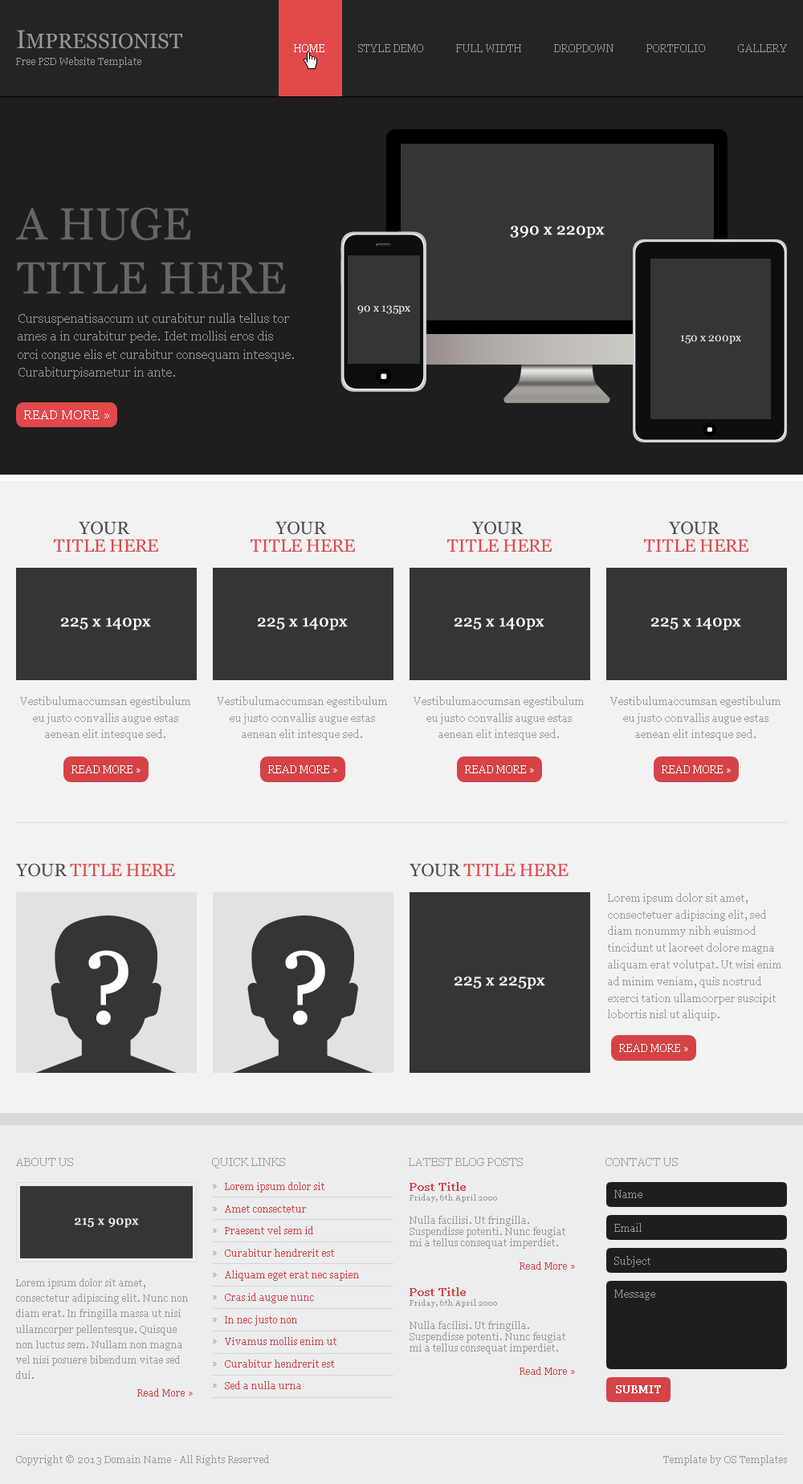
<style>
.page{position:relative;width:803px;height:1484px;background:#f2f2f2}
.page>*{position:absolute;margin:0}
.t1{font:20.9px "Georgia";color:#999999}
.t2{font:25.7px "Georgia";color:#999999}
.t3{font:10.4px "Georgia";color:#ffffff}
.t4{font:10.4px "Georgia";color:#979797}
.t5{font:9.6px "Georgia";color:#999999}
.t6{font:45px/54px "Georgia";color:#666666}
.t7{font:16.1px "Georgia";color:#ffffff;font-weight:bold}
.t8{font:11.2px "Georgia";color:#ffffff}
.t9{font:12.9px/18px "Georgia";color:#999999}
.t10{font:12.9px "Georgia";color:#ffffff}
.t11{font:17.7px/17.7px "Georgia";color:#e1484b}
.t12{font:17.7px/17.7px "Georgia";color:#4a4a4a}
.t13{font:10.4px/16.7px "Georgia";color:#999999}
.t14{font:17.7px "Georgia";color:#e1484b}
.t15{font:17.7px "Georgia";color:#4a4a4a}
.t16{font:102.7px "Georgia";color:#ffffff;font-weight:bold}
.t17{font:11.2px "Georgia";color:#9b9b9f}
.t18{font:9.6px/22.2px "Georgia";color:#989898}
.t19{font:9.6px/22.2px "Georgia";color:#d54346}
.t20{font:9.6px/11.6px "Georgia";color:#989898}
.t21{font:11.2px/13.5px "Georgia";color:#d44346;font-weight:bold}
.t22{font:8px/9.6px "Georgia";color:#999999}
.t23{font:9.6px/11.6px "Georgia";color:#d44346}
.t24{font:10.4px "Georgia";color:#989898}
.t25{font:12.5px "Georgia";color:#f8f8f8;font-weight:bold}
.t26{font:9.6px/15.4px "Georgia";color:#989898}
.t27{font:9.6px/17.4px "Georgia";color:#d44346}
.t28{font:10.4px "Georgia";color:#ffffff;font-weight:bold}
</style>
<div class="page">
<p class="t1" style="left:17px;top:30px;width:165px;height:19px"><span class="t2">I</span>MPRESSIONIST</p>
<p class="t3" style="left:294px;top:44px;width:31px;height:8px">HOME</p>
<p class="t4" style="left:358px;top:44px;width:65px;height:8px">STYLE DEMO</p>
<p class="t4" style="left:456px;top:44px;width:65px;height:8px">FULL WIDTH</p>
<p class="t4" style="left:554px;top:44px;width:60px;height:8px">DROPDOWN</p>
<p class="t4" style="left:647px;top:44px;width:58px;height:8px">PORTFOLIO</p>
<p class="t4" style="left:738px;top:44px;width:49px;height:8px">GALLERY</p>
<p class="t5" style="left:16px;top:57px;width:125px;height:10px">Free PSD Website Template</p>
<p class="t6" style="left:16px;top:207px;width:270px;height:87px">A HUGE TITLE HERE</p>
<p class="t7" style="left:510px;top:226px;width:95px;height:13px">390 x 220px</p>
<p class="t8" style="left:357px;top:305px;width:53px;height:9px">90 x 135px</p>
<p class="t9" style="left:18px;top:313px;width:276px;height:66px">Cursuspenatisaccum ut curabitur nulla tellus tor ames a in curabitur pede. Idet mollisi eros dis orci congue elis et curabitur consequam intesque. Curabiturpisametur in ante.</p>
<p class="t8" style="left:680px;top:335px;width:61px;height:9px">150 x 200px</p>
<p class="t10" style="left:24px;top:410px;width:85px;height:9px">READ MORE »</p>
<p class="t11" style="left:54px;top:521px;width:104px;height:31px;text-align:center"><span class="t12">YOUR <br></span>TITLE HERE</p>
<p class="t11" style="left:251px;top:521px;width:104px;height:31px;text-align:center"><span class="t12">YOUR <br></span>TITLE HERE</p>
<p class="t11" style="left:447px;top:521px;width:105px;height:31px;text-align:center"><span class="t12">YOUR <br></span>TITLE HERE</p>
<p class="t11" style="left:644px;top:521px;width:105px;height:31px;text-align:center"><span class="t12">YOUR <br></span>TITLE HERE</p>
<p class="t7" style="left:61px;top:618px;width:90px;height:13px">225 x 140px</p>
<p class="t7" style="left:258px;top:618px;width:90px;height:13px">225 x 140px</p>
<p class="t7" style="left:455px;top:618px;width:90px;height:13px">225 x 140px</p>
<p class="t7" style="left:651px;top:618px;width:90px;height:13px">225 x 140px</p>
<p class="t13" style="left:20px;top:696px;width:170px;height:45px;text-align:center">Vestibulumaccumsan egestibulum eu justo convallis augue estas aenean elit intesque sed.</p>
<p class="t13" style="left:217px;top:696px;width:170px;height:45px;text-align:center">Vestibulumaccumsan egestibulum eu justo convallis augue estas aenean elit intesque sed.</p>
<p class="t13" style="left:414px;top:696px;width:170px;height:45px;text-align:center">Vestibulumaccumsan egestibulum eu justo convallis augue estas aenean elit intesque sed.</p>
<p class="t13" style="left:610px;top:696px;width:171px;height:45px;text-align:center">Vestibulumaccumsan egestibulum eu justo convallis augue estas aenean elit intesque sed.</p>
<p class="t3" style="left:71px;top:766px;width:70px;height:8px">READ MORE »</p>
<p class="t3" style="left:268px;top:766px;width:69px;height:8px">READ MORE »</p>
<p class="t3" style="left:465px;top:766px;width:69px;height:8px">READ MORE »</p>
<p class="t3" style="left:662px;top:766px;width:69px;height:8px">READ MORE »</p>
<p class="t14" style="left:16px;top:864px;width:159px;height:13px"><span class="t15">YOUR </span>TITLE HERE</p>
<p class="t14" style="left:410px;top:864px;width:159px;height:13px"><span class="t15">YOUR </span>TITLE HERE</p>
<p class="t13" style="left:608px;top:893px;width:174px;height:128px">Lorem ipsum dolor sit amet, consectetuer adipiscing elit, sed diam nonummy nibh euismod tincidunt ut laoreet dolore magna aliquam erat volutpat. Ut wisi enim ad minim veniam, quis nostrud exerci tation ullamcorper suscipit lobortis nisl ut aliquip.</p>
<p class="t16" style="left:88px;top:950px;width:41px;height:76px">?</p>
<p class="t16" style="left:285px;top:950px;width:40px;height:76px">?</p>
<p class="t7" style="left:455px;top:977px;width:90px;height:13px">225 x 225px</p>
<p class="t3" style="left:619px;top:1044px;width:69px;height:8px">READ MORE »</p>
<p class="t17" style="left:16px;top:1158px;width:57px;height:8px">ABOUT US</p>
<p class="t17" style="left:212px;top:1158px;width:73px;height:11px">QUICK LINKS</p>
<p class="t17" style="left:409px;top:1158px;width:114px;height:8px">LATEST BLOG POSTS</p>
<p class="t17" style="left:606px;top:1158px;width:72px;height:8px">CONTACT US</p>
<p class="t18" style="left:213px;top:1185px;width:4px;height:203px">»<br>»<br>»<br>»<br>»<br>»<br>»<br>»<br>»<br>»</p>
<p class="t19" style="left:225px;top:1182px;width:134px;height:208px">Lorem ipsum dolor sit<br>Amet consectetur<br>Praesent vel sem id<br>Curabitur hendrerit est<br>Aliquam eget erat nec sapien<br>Cras id augue nunc<br>In nec justo non<br>Vivamus mollis enim ut<br>Curabitur hendrerit est<br>Sed a nulla urna</p>
<p class="t20" style="left:410px;top:1182px;width:165px;height:88px"><span class="t21">Post Title<br></span><span class="t22">Friday, 6th April 2000<br></span><br>Nulla facilisi. Ut fringilla. Suspendisse potenti. Nunc feugiat mi a tellus consequat imperdiet.<br><br><span class="t23">Read More »</span></p>
<p class="t24" style="left:615px;top:1190px;width:28px;height:8px">Name</p>
<p class="t25" style="left:75px;top:1218px;width:64px;height:10px">215 x 90px</p>
<p class="t24" style="left:615px;top:1223px;width:27px;height:9px">Email</p>
<p class="t24" style="left:615px;top:1256px;width:36px;height:12px">Subject</p>
<p class="t26" style="left:16px;top:1279px;width:177px;height:118px">Lorem ipsum dolor sit amet, consectetur adipiscing elit. Nunc non diam erat. In fringilla massa ut nisi ullamcorper pellentesque. Quisque non luctus sem. Nullam non magna vel nisi posuere bibendum vitae sed dui.<br><span class="t27">Read More »</span></p>
<p class="t20" style="left:410px;top:1288px;width:165px;height:87px"><span class="t21">Post Title<br></span><span class="t22">Friday, 6th April 2000<br></span><br>Nulla facilisi. Ut fringilla. Suspendisse potenti. Nunc feugiat mi a tellus consequat imperdiet.<br><br><span class="t23">Read More »</span></p>
<p class="t24" style="left:615px;top:1290px;width:40px;height:11px">Message</p>
<p class="t28" style="left:616px;top:1386px;width:45px;height:8px">SUBMIT</p>
<p class="t5" style="left:16px;top:1456px;width:253px;height:10px">Copyright © 2013 Domain Name - All Rights Reserved</p>
<p class="t5" style="left:664px;top:1456px;width:123px;height:10px">Template by OS Templates</p>
</div>
